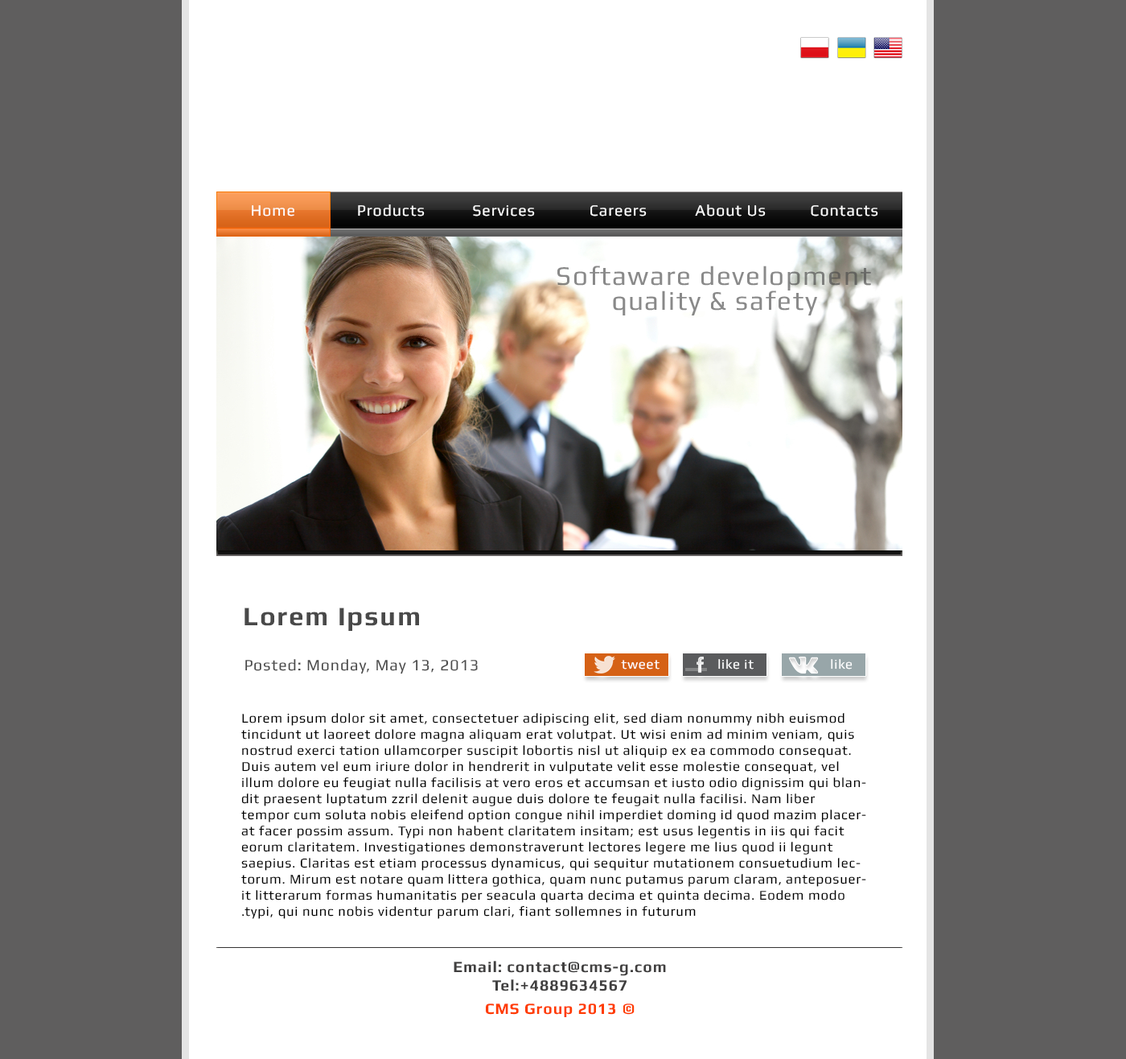
<style>
.page{position:relative;width:1126px;height:1059px;background:#ffffff}
.page>*{position:absolute;margin:0}
.t1{font:15.6px "Play";letter-spacing:0.05em;color:#ffffff}
.t2{font:26.8px "Play-Bold";letter-spacing:0.05em;color:#494949}
.t3{font:15.6px "Play";letter-spacing:0.05em;color:#494949}
.t4{font:13.4px "Play";letter-spacing:0.05em;color:#ffffff}
.t5{font:9.7px "Play";letter-spacing:0.05em;color:#000000}
.t6{font:15.6px "Play-Bold";letter-spacing:0.05em;color:#403f3f}
.t7{font:15.6px "Play-Bold";letter-spacing:0.05em;color:#ff3c00}
</style>
<div class="page">
<p class="t1" style="left:252px;top:205px;width:42px;height:11px">Home</p>
<p class="t1" style="left:358px;top:204px;width:67px;height:12px">Products</p>
<p class="t1" style="left:473px;top:205px;width:62px;height:11px">Services</p>
<p class="t1" style="left:591px;top:205px;width:56px;height:11px">Careers</p>
<p class="t1" style="left:695px;top:204px;width:71px;height:12px">About Us</p>
<p class="t1" style="left:811px;top:205px;width:68px;height:11px">Contacts</p>
<p class="t2" style="left:245px;top:607px;width:174px;height:24px">Lorem Ipsum</p>
<p class="t3" style="left:245px;top:659px;width:233px;height:15px">Posted: Monday, May 13, 2013</p>
<p class="t4" style="left:621px;top:660px;width:39px;height:9px">tweet</p>
<p class="t4" style="left:718px;top:659px;width:36px;height:10px">like it</p>
<p class="t4" style="left:831px;top:659px;width:22px;height:10px">like</p>
<p class="t5" style="left:241px;top:713px;width:625px;height:206px;text-align:right">Lorem ipsum dolor sit amet, consectetuer adipiscing elit, sed diam nonummy nibh euismod tincidunt ut laoreet dolore magna aliquam erat volutpat. Ut wisi enim ad minim veniam, quis nostrud exerci tation ullamcorper suscipit lobortis nisl ut aliquip ex ea commodo consequat. Duis autem vel eum iriure dolor in hendrerit in vulputate velit esse molestie consequat, vel illum dolore eu feugiat nulla facilisis at vero eros et accumsan et iusto odio dignissim qui blandit praesent luptatum zzril delenit augue duis dolore te feugait nulla facilisi. Nam liber tempor cum soluta nobis eleifend option congue nihil imperdiet doming id quod mazim placerat facer possim assum. Typi non habent claritatem insitam; est usus legentis in iis qui facit eorum claritatem. Investigationes demonstraverunt lectores legere me lius quod ii legunt saepius. Claritas est etiam processus dynamicus, qui sequitur mutationem consuetudium lectorum. Mirum est notare quam littera gothica, quam nunc putamus parum claram, anteposuerit litterarum formas humanitatis per seacula quarta decima et quinta decima. Eodem modo typi, qui nunc nobis videntur parum clari, fiant sollemnes in futurum.</p>
<p class="t6" style="left:454px;top:961px;width:212px;height:30px;text-align:center">Email: contact@cms-g.com<br>Tel:+4889634567</p>
<p class="t7" style="left:486px;top:1003px;width:149px;height:14px">© CMS Group 2013</p>
</div>
